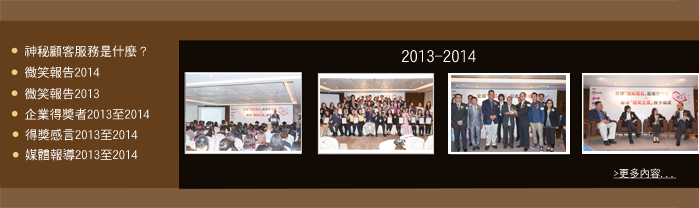
<style>
.page{position:relative;width:699px;height:208px;background:#120b05}
.page>*{position:absolute;margin:0}
.t1{font:12.5px "DFHei-Md-HKSCS-U";color:#ffffff}
.t2{font:16.7px "DFHei-Md-HKSCS-U";color:#ffffff}
.t3{font:10.4px "DFHei-Md-HKSCS-U";color:#ffffff;text-decoration:underline}
</style>
<div class="page">
<p class="t1" style="left:25px;top:45px;width:121px;height:12px">神秘顧客服務是什麼？</p>
<p class="t2" style="left:402px;top:50px;width:74px;height:13px">2013-2014</p>
<p class="t1" style="left:25px;top:66px;width:75px;height:12px">微笑報告2014</p>
<p class="t1" style="left:25px;top:88px;width:74px;height:12px">微笑報告2013</p>
<p class="t1" style="left:25px;top:108px;width:125px;height:12px">企業得獎者2013至2014</p>
<p class="t1" style="left:25px;top:128px;width:113px;height:13px">得獎感言2013至2014</p>
<p class="t1" style="left:25px;top:148px;width:113px;height:13px">媒體報導2013至2014</p>
<p class="t3" style="left:613px;top:168px;width:64px;height:11px">&gt;更多內容...</p>
</div>
